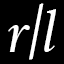
<style>
.page{position:relative;width:64px;height:64px;background:#000000}
.page>*{position:absolute;margin:0}
.t1{font:55.6px "CrimsonText-Italic";color:#ffffff}
</style>
<div class="page">
<p class="t1" style="left:8px;top:3px;width:48px;height:57px">r|l</p>
</div>
